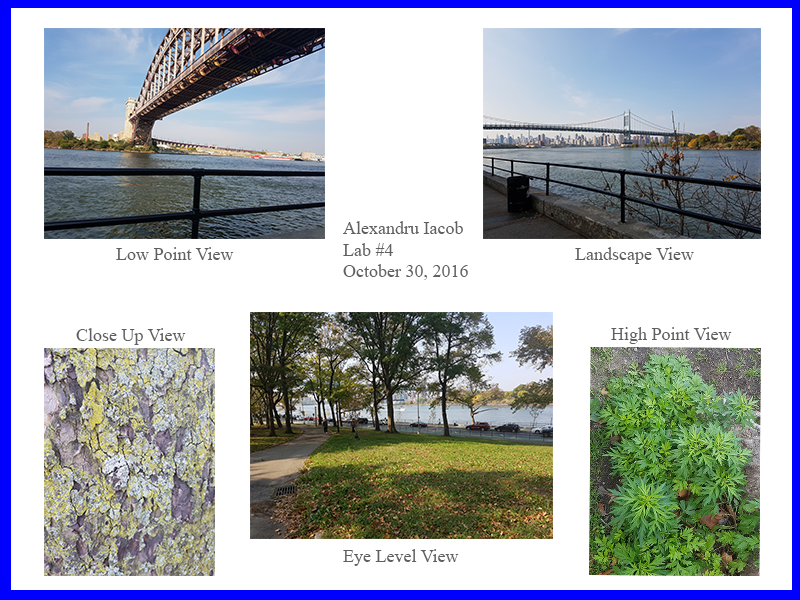
<style>
.page{position:relative;width:800px;height:600px;background:#ffffff}
.page>*{position:absolute;margin:0}
.t1{font:18px "TimesNewRomanPSMT";color:#606060}
</style>
<div class="page">
<p class="t1" style="left:343px;top:221px;width:125px;height:59px">Alexandru Iacob<br>Lab #4<br>October 30, 2016</p>
<p class="t1" style="left:116px;top:247px;width:118px;height:13px">Low Point View</p>
<p class="t1" style="left:575px;top:247px;width:119px;height:17px">Landscape View</p>
<p class="t1" style="left:76px;top:328px;width:110px;height:17px">Close Up View</p>
<p class="t1" style="left:611px;top:327px;width:121px;height:17px">High Point View</p>
<p class="t1" style="left:343px;top:549px;width:116px;height:17px">Eye Level View</p>
</div>
